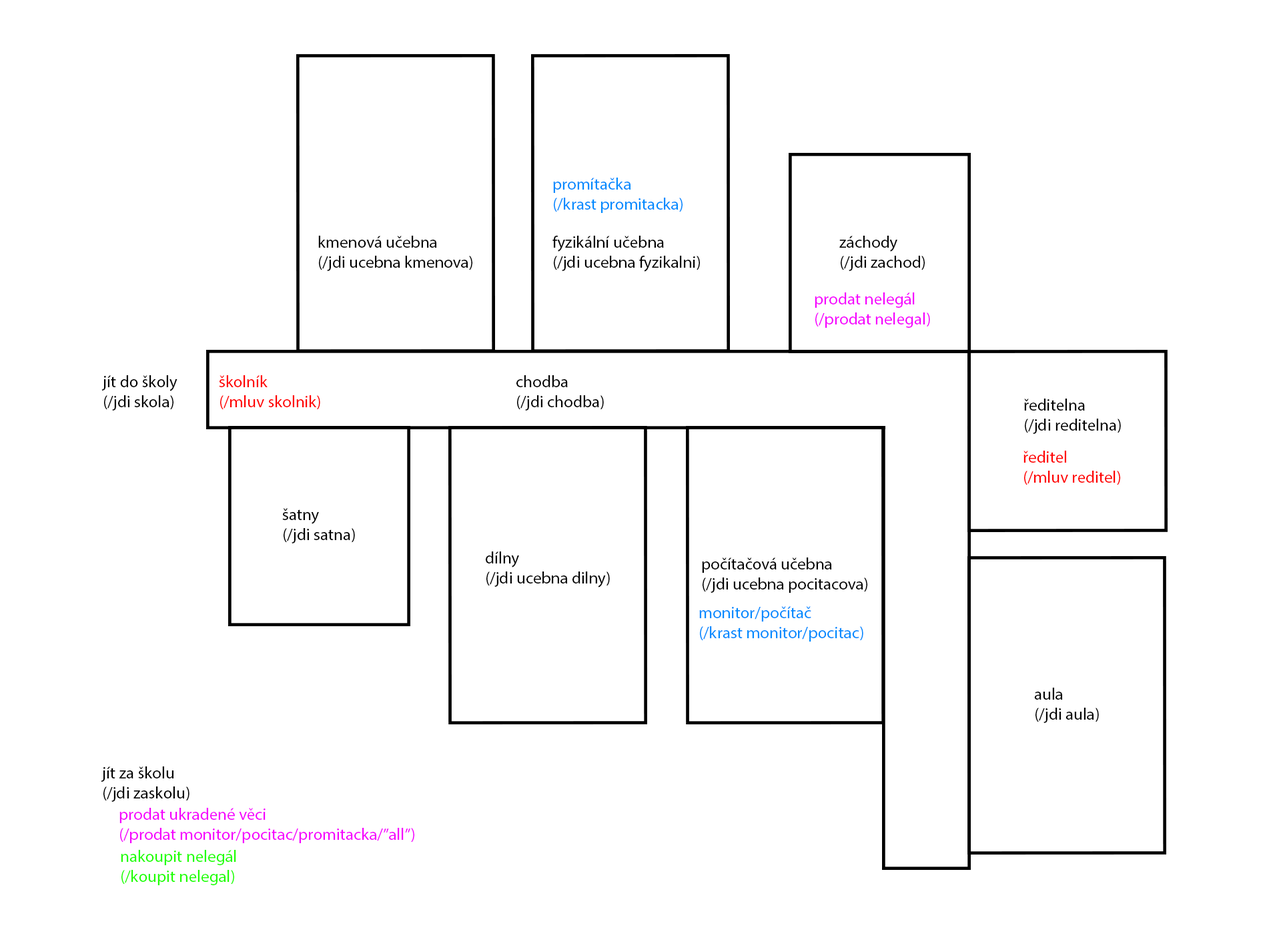
<style>
.page{position:relative;width:1261px;height:946px;background:#ffffff}
.page>*{position:absolute;margin:0}
.t1{font:16.7px "MyriadPro-Regular";color:#008aff}
.t2{font:16.7px "MyriadPro-Regular";color:#000000}
.t3{font:16.7px "MyriadPro-Regular";color:#f600ff}
.t4{font:16.7px "MyriadPro-Regular";color:#ff0000}
.t5{font:16.7px "MyriadPro-Regular";color:#1eff00}
</style>
<div class="page">
<p class="t1" style="left:553px;top:177px;width:130px;height:36px">promítačka<br>(/krast promitacka)</p>
<p class="t2" style="left:318px;top:236px;width:154px;height:35px">kmenová učebna<br>(/jdi ucebna kmenova)</p>
<p class="t2" style="left:552px;top:236px;width:148px;height:36px">fyzikální učebna<br>(/jdi ucebna fyzikalni)</p>
<p class="t2" style="left:839px;top:236px;width:86px;height:35px">záchody<br>(/jdi zachod)</p>
<p class="t3" style="left:815px;top:292px;width:115px;height:36px">prodat nelegál<br>(/prodat nelegal)</p>
<p class="t2" style="left:101px;top:375px;width:76px;height:35px">jít do školy<br>(/jdi skola)</p>
<p class="t4" style="left:219px;top:375px;width:101px;height:35px">školník<br>(/mluv skolnik)</p>
<p class="t2" style="left:516px;top:375px;width:88px;height:35px">chodba<br>(/jdi chodba)</p>
<p class="t2" style="left:1024px;top:398px;width:97px;height:36px">ředitelna<br>(/jdi reditelna)</p>
<p class="t4" style="left:1024px;top:450px;width:96px;height:35px">ředitel<br>(/mluv reditel)</p>
<p class="t2" style="left:282px;top:508px;width:73px;height:35px">šatny<br>(/jdi satna)</p>
<p class="t2" style="left:486px;top:551px;width:124px;height:36px">dílny<br>(/jdi ucebna dilny)</p>
<p class="t2" style="left:702px;top:557px;width:165px;height:36px">počítačová učebna<br>(/jdi ucebna pocitacova)</p>
<p class="t1" style="left:699px;top:606px;width:164px;height:35px">monitor/počítač<br>(/krast monitor/pocitac)</p>
<p class="t2" style="left:1034px;top:687px;width:65px;height:36px">aula<br>(/jdi aula)</p>
<p class="t2" style="left:101px;top:766px;width:89px;height:35px">jít za školu<br>(/jdi zaskolu)</p>
<p class="t3" style="left:119px;top:807px;width:295px;height:36px">prodat ukradené věci<br>(/prodat monitor/pocitac/promitacka/”all”)</p>
<p class="t5" style="left:121px;top:849px;width:115px;height:36px">nakoupit nelegál<br>(/koupit nelegal)</p>
</div>
